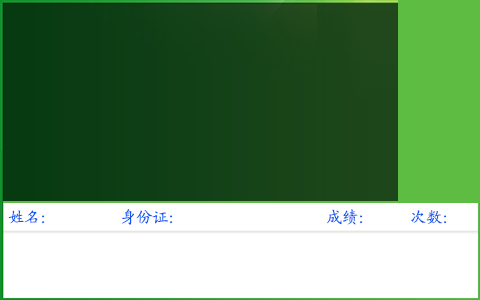
<style>
.page{position:relative;width:480px;height:300px;background:#ffffff}
.page>*{position:absolute;margin:0}
.t1{font:16px "KaiTi_GB2312";color:#0b57f1}
</style>
<div class="page">
<p class="t1" style="left:121px;top:209px;width:52px;height:16px">身份证：</p>
<p class="t1" style="left:327px;top:209px;width:36px;height:16px">成绩：</p>
<p class="t1" style="left:8px;top:210px;width:37px;height:14px">姓名：</p>
<p class="t1" style="left:411px;top:210px;width:36px;height:14px">次数：</p>
</div>
